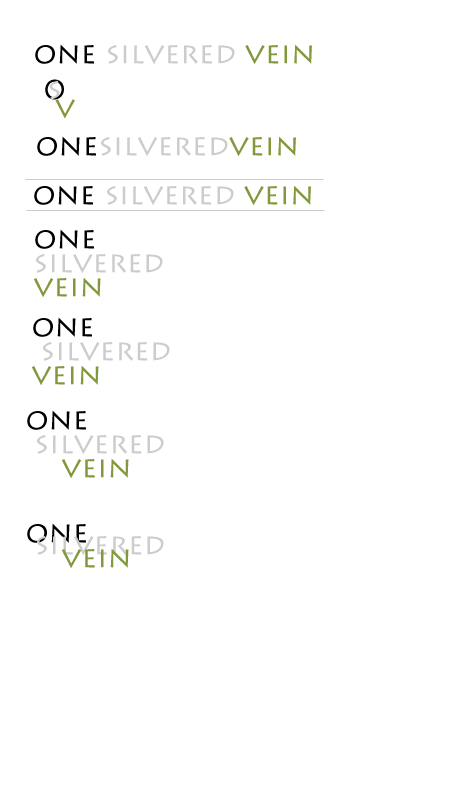
<style>
.page{position:relative;width:450px;height:800px;background:#ffffff}
.page>*{position:absolute;margin:0}
.t1{font:30px "LithosPro-Regular";color:#cccccc}
.t2{font:30px "LithosPro-Regular";color:#000000}
.t3{font:30px "LithosPro-Regular";color:#81983c}
.t4{font:30px/24px "LithosPro-Regular";color:#cccccc}
.t5{font:30px/24px "LithosPro-Regular";color:#000000}
.t6{font:30px/24px "LithosPro-Regular";color:#81983c}
</style>
<div class="page">
<p class="t1" style="left:35px;top:44px;width:277px;height:21px"><span class="t2">one</span> silvered <span class="t3">vein</span></p>
<p class="t2" style="left:45px;top:79px;width:19px;height:21px">0</p>
<p class="t3" style="left:55px;top:99px;width:20px;height:20px">v</p>
<p class="t1" style="left:37px;top:136px;width:259px;height:21px"><span class="t2">one</span>silvered<span class="t3">vein</span></p>
<p class="t1" style="left:34px;top:185px;width:277px;height:21px"><span class="t2">one</span> silvered <span class="t3">vein</span></p>
<p class="t4" style="left:33px;top:229px;width:130px;height:69px"><span class="t5">one<br></span>silvered<br><span class="t6">vein</span></p>
<p class="t4" style="left:31px;top:317px;width:139px;height:69px"><span class="t5">one<br></span> silvered<br><span class="t6">vein</span></p>
<p class="t4" style="left:27px;top:410px;width:137px;height:69px"><span class="t5">one<br></span> silvered<br><span class="t6"> vein</span></p>
<p class="t4" style="left:27px;top:523px;width:137px;height:46px"><span class="t5">one<br> </span>silvered<br><span class="t6"> vein</span></p>
</div>
